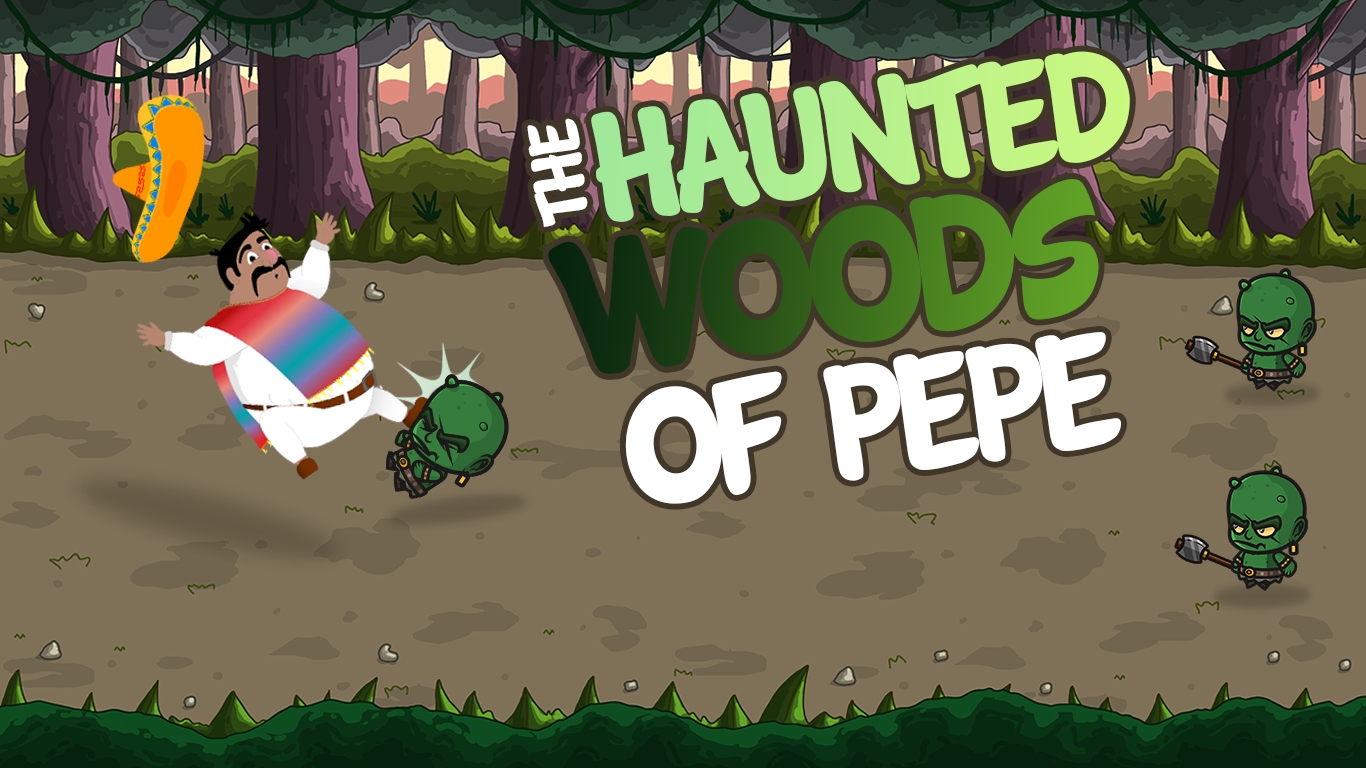
<style>
.page{position:relative;width:1366px;height:768px;background:#7f7158}
.page>*{position:absolute;margin:0}
.t1{font:158.9px "Cartwheel";letter-spacing:-0.04em;color:#b4f08e}
.t2{font:73.8px "Cartwheel";letter-spacing:-0.04em;color:#ffffff}
.t3{font:195.5px "Cartwheel";letter-spacing:-0.04em}
.t4{font:168px "Cartwheel";letter-spacing:-0.04em;color:#ffffff}
</style>
<div class="page">
<p class="t1" style="left:591px;top:51px;width:539px;height:171px;rotate:-7deg">HAUNTED</p>
<p class="t2" style="left:527px;top:118px;width:61px;height:109px;rotate:-97deg">THE</p>
<p class="t3" style="left:548px;top:179px;width:551px;height:195px;rotate:-7deg">WOODS</p>
<p class="t4" style="left:625px;top:332px;width:496px;height:172px;rotate:-8deg">OF PEPE</p>
</div>
